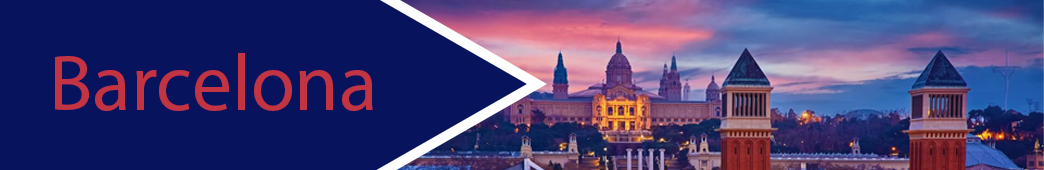
<style>
.page{position:relative;width:1044px;height:170px;background:#07135d}
.page>*{position:absolute;margin:0}
.t1{font:80px "MyriadPro-Regular";color:#c23441}
</style>
<div class="page">
<p class="t1" style="left:55px;top:53px;width:318px;height:58px">Barcelona</p>
</div>
